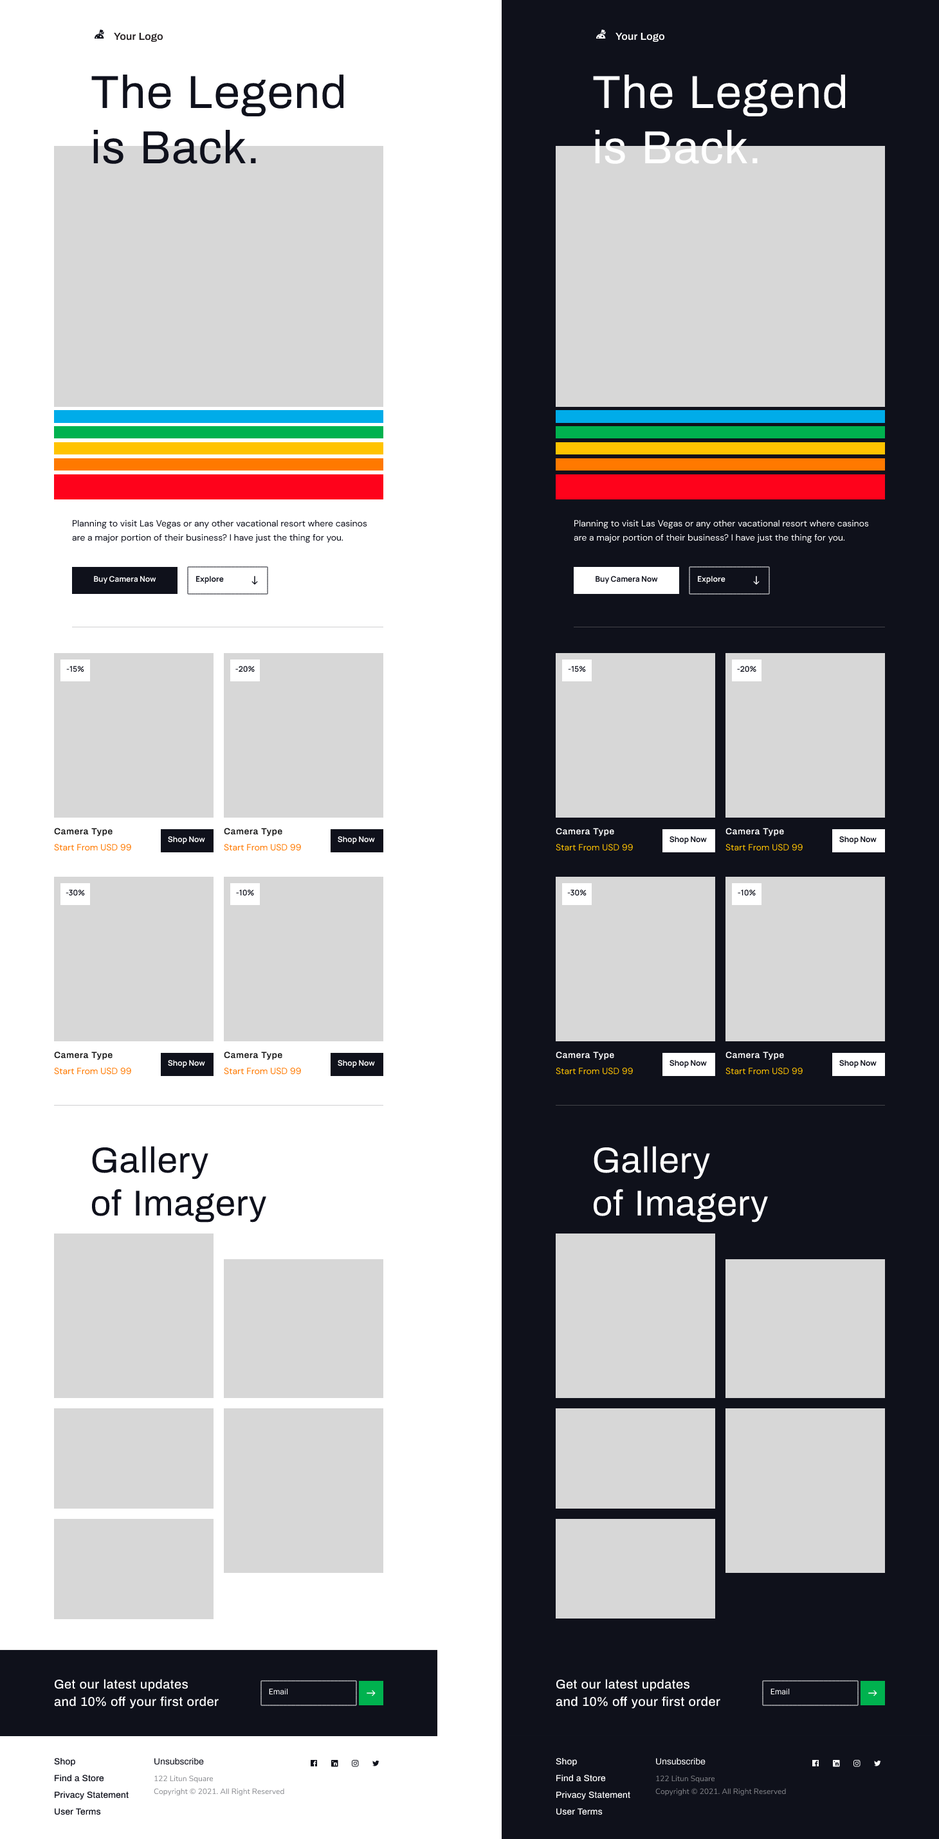
<style>
.page{position:relative;width:939px;height:1839px;background:#d7d7d7}
.page>*{position:absolute;margin:0}
.t1{font:10.3px "Archivo-SemiBold";color:#241f20}
.t2{font:10.3px "Archivo-SemiBold";color:#ffffff}
.t3{font:46.3px "Archivo-Regular";letter-spacing:0.021em;color:#0f111c}
.t4{font:46.3px "Archivo-Regular";letter-spacing:0.021em;color:#ffffff}
.t5{font:9px/14.1px "DMSans-Regular";color:#0f111c}
.t6{font:9px/14.1px "DMSans-Regular";color:#ffffff}
.t7{font:7.7px "Manrope-Bold";color:#ffffff}
.t8{font:7.7px "Manrope-Bold";color:#0f111c}
.t9{font:7.7px "Manrope-SemiBold";color:#0f111c;text-transform:uppercase}
.t10{font:9px "Archivo-SemiBold";letter-spacing:0.036em;color:#191919}
.t11{font:9px "Archivo-SemiBold";letter-spacing:0.036em;color:#ffffff}
.t12{font:9px "DMSans-Regular";color:#ff7a00}
.t13{font:9px "DMSans-Regular";color:#ffc300}
.t14{font:36px "Archivo-Regular";letter-spacing:0.018em;color:#0f111c}
.t15{font:36px "Archivo-Regular";letter-spacing:0.018em;color:#ffffff}
.t16{font:12.9px/17.4px "Archivo-Medium";letter-spacing:0.018em;color:#ffffff}
.t17{font:7.7px "Manrope-Medium";color:#ffffff}
.t18{font:9px "Archivo-Medium";color:#0f111c}
.t19{font:9px "Archivo-Regular";color:#0f111c}
.t20{font:9px "Archivo-Medium";color:#ffffff}
.t21{font:9px "Archivo-Regular";color:#ffffff}
.t22{font:7.7px/12.9px "NunitoSans-Regular";color:#87888d}
</style>
<div class="page">
<p class="t1" style="left:114px;top:33px;width:49px;height:9px">Your Logo</p>
<p class="t2" style="left:615px;top:33px;width:49px;height:9px">Your Logo</p>
<p class="t3" style="left:91px;top:74px;width:253px;height:90px">The Legend<br>is Back.</p>
<p class="t4" style="left:593px;top:74px;width:252px;height:90px">The Legend<br>is Back.</p>
<p class="t5" style="left:72px;top:519px;width:295px;height:24px">Planning to visit Las Vegas or any other vacational resort where casinos are a major portion of their business? I have just the thing for you.</p>
<p class="t6" style="left:573px;top:519px;width:296px;height:24px">Planning to visit Las Vegas or any other vacational resort where casinos are a major portion of their business? I have just the thing for you.</p>
<p class="t7" style="left:94px;top:576px;width:62px;height:8px">Buy Camera Now</p>
<p class="t8" style="left:195px;top:576px;width:29px;height:8px">Explore</p>
<p class="t8" style="left:595px;top:576px;width:63px;height:8px">Buy Camera Now</p>
<p class="t7" style="left:697px;top:576px;width:28px;height:8px">Explore</p>
<p class="t9" style="left:66px;top:666px;width:18px;height:6px">-15%</p>
<p class="t9" style="left:235px;top:666px;width:20px;height:6px">-20%</p>
<p class="t9" style="left:568px;top:666px;width:18px;height:6px">-15%</p>
<p class="t9" style="left:737px;top:666px;width:19px;height:6px">-20%</p>
<p class="t10" style="left:54px;top:828px;width:59px;height:8px">Camera Type</p>
<p class="t10" style="left:224px;top:828px;width:58px;height:8px">Camera Type</p>
<p class="t11" style="left:555px;top:828px;width:59px;height:8px">Camera Type</p>
<p class="t11" style="left:725px;top:828px;width:59px;height:8px">Camera Type</p>
<p class="t12" style="left:54px;top:844px;width:77px;height:7px">Start From USD 99</p>
<p class="t7" style="left:168px;top:836px;width:37px;height:8px">Shop Now</p>
<p class="t12" style="left:224px;top:844px;width:77px;height:7px">Start From USD 99</p>
<p class="t7" style="left:338px;top:836px;width:37px;height:8px">Shop Now</p>
<p class="t13" style="left:555px;top:844px;width:78px;height:7px">Start From USD 99</p>
<p class="t8" style="left:669px;top:836px;width:37px;height:8px">Shop Now</p>
<p class="t13" style="left:725px;top:844px;width:77px;height:7px">Start From USD 99</p>
<p class="t8" style="left:839px;top:836px;width:37px;height:8px">Shop Now</p>
<p class="t9" style="left:66px;top:890px;width:19px;height:6px">-30%</p>
<p class="t9" style="left:236px;top:890px;width:18px;height:6px">-10%</p>
<p class="t9" style="left:567px;top:890px;width:19px;height:6px">-30%</p>
<p class="t9" style="left:737px;top:890px;width:18px;height:6px">-10%</p>
<p class="t10" style="left:54px;top:1052px;width:59px;height:8px">Camera Type</p>
<p class="t7" style="left:168px;top:1060px;width:37px;height:8px">Shop Now</p>
<p class="t10" style="left:224px;top:1052px;width:58px;height:8px">Camera Type</p>
<p class="t7" style="left:338px;top:1060px;width:37px;height:8px">Shop Now</p>
<p class="t11" style="left:555px;top:1052px;width:59px;height:8px">Camera Type</p>
<p class="t8" style="left:669px;top:1060px;width:37px;height:8px">Shop Now</p>
<p class="t11" style="left:725px;top:1052px;width:59px;height:8px">Camera Type</p>
<p class="t8" style="left:839px;top:1060px;width:37px;height:8px">Shop Now</p>
<p class="t12" style="left:54px;top:1068px;width:77px;height:7px">Start From USD 99</p>
<p class="t12" style="left:224px;top:1068px;width:77px;height:7px">Start From USD 99</p>
<p class="t13" style="left:555px;top:1068px;width:78px;height:7px">Start From USD 99</p>
<p class="t13" style="left:725px;top:1068px;width:77px;height:7px">Start From USD 99</p>
<p class="t14" style="left:91px;top:1146px;width:175px;height:77px">Gallery<br>of Imagery</p>
<p class="t15" style="left:593px;top:1146px;width:175px;height:77px">Gallery<br>of Imagery</p>
<p class="t16" style="left:54px;top:1679px;width:165px;height:30px">Get our latest updates<br>and 10% off your first order</p>
<p class="t16" style="left:555px;top:1679px;width:165px;height:30px">Get our latest updates<br>and 10% off your first order</p>
<p class="t17" style="left:269px;top:1689px;width:19px;height:6px">Email</p>
<p class="t17" style="left:770px;top:1689px;width:19px;height:6px">Email</p>
<p class="t18" style="left:54px;top:1758px;width:21px;height:9px">Shop</p>
<p class="t19" style="left:154px;top:1758px;width:50px;height:7px">Unsubscribe</p>
<p class="t20" style="left:555px;top:1758px;width:22px;height:9px">Shop</p>
<p class="t21" style="left:656px;top:1758px;width:49px;height:7px">Unsubscribe</p>
<p class="t18" style="left:55px;top:1774px;width:49px;height:8px">Find a Store</p>
<p class="t22" style="left:154px;top:1776px;width:130px;height:20px">122 Litun Square<br>Copyright © 2021. All Right Reserved</p>
<p class="t20" style="left:556px;top:1774px;width:50px;height:8px">Find a Store</p>
<p class="t22" style="left:655px;top:1776px;width:131px;height:20px">122 Litun Square<br>Copyright © 2021. All Right Reserved</p>
<p class="t18" style="left:55px;top:1791px;width:74px;height:9px">Privacy Statement</p>
<p class="t20" style="left:556px;top:1791px;width:74px;height:9px">Privacy Statement</p>
<p class="t18" style="left:55px;top:1808px;width:46px;height:7px">User Terms</p>
<p class="t20" style="left:556px;top:1808px;width:46px;height:7px">User Terms</p>
</div>
